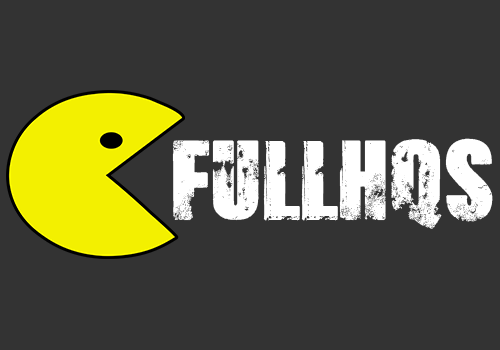
<style>
.page{position:relative;width:500px;height:350px;background:#333333}
.page>*{position:absolute;margin:0}
.t1{font:95.4px "Broken-Detroit";color:#ffffff;scale:0.94 1}
</style>
<div class="page">
<p class="t1" style="left:172px;top:138px;width:321px;height:91px">fullhqs</p>
</div>
